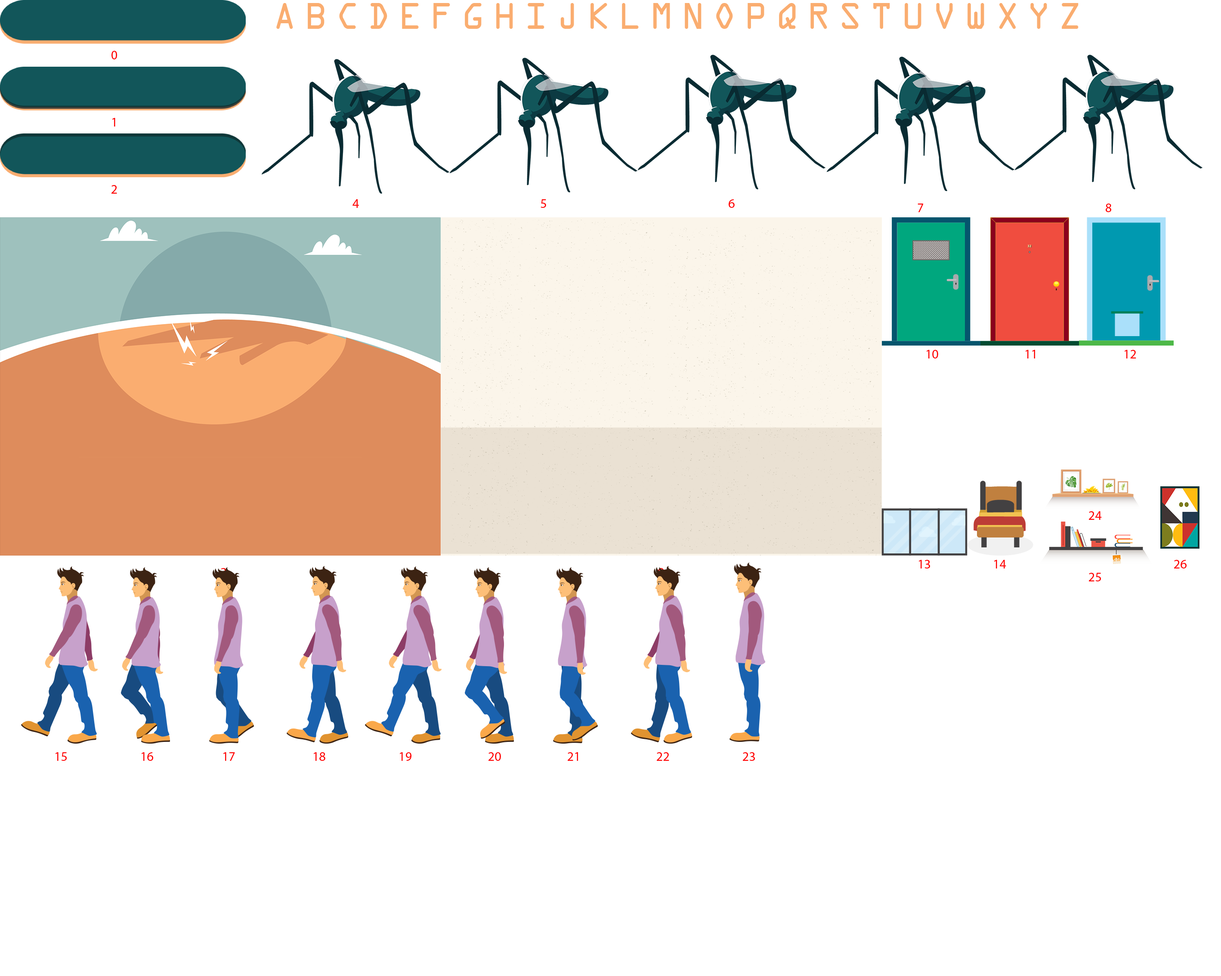
<style>
.page{position:relative;width:1221px;height:976px;background:#ffffff}
.page>*{position:absolute;margin:0}
.t1{font:39.6px "OCRAExtended";color:#faad70}
.t2{font:12.9px "MyriadPro-Regular";color:#ff0000}
.t3{font:12.9px "MyriadPro-Regular"}
</style>
<div class="page">
<p class="t1" style="left:276px;top:3px;width:17px;height:26px">A</p>
<p class="t1" style="left:308px;top:3px;width:17px;height:26px">B</p>
<p class="t1" style="left:339px;top:3px;width:17px;height:26px">C</p>
<p class="t1" style="left:371px;top:3px;width:16px;height:26px">D</p>
<p class="t1" style="left:402px;top:3px;width:17px;height:26px">E</p>
<p class="t1" style="left:434px;top:3px;width:16px;height:26px">F</p>
<p class="t1" style="left:465px;top:3px;width:17px;height:26px">G</p>
<p class="t1" style="left:496px;top:3px;width:17px;height:26px">H</p>
<p class="t1" style="left:528px;top:3px;width:17px;height:26px">I</p>
<p class="t1" style="left:561px;top:3px;width:13px;height:26px">J</p>
<p class="t1" style="left:591px;top:3px;width:16px;height:26px">K</p>
<p class="t1" style="left:622px;top:3px;width:17px;height:26px">L</p>
<p class="t1" style="left:653px;top:3px;width:17px;height:26px">M</p>
<p class="t1" style="left:685px;top:3px;width:17px;height:26px">N</p>
<p class="t1" style="left:716px;top:3px;width:17px;height:26px">O</p>
<p class="t1" style="left:748px;top:3px;width:17px;height:26px">P</p>
<p class="t1" style="left:779px;top:3px;width:17px;height:26px">Q</p>
<p class="t1" style="left:811px;top:3px;width:16px;height:26px">R</p>
<p class="t1" style="left:842px;top:3px;width:17px;height:26px">S</p>
<p class="t1" style="left:873px;top:3px;width:17px;height:26px">T</p>
<p class="t1" style="left:905px;top:3px;width:17px;height:26px">U</p>
<p class="t1" style="left:936px;top:3px;width:17px;height:26px">V</p>
<p class="t1" style="left:968px;top:3px;width:17px;height:26px">W</p>
<p class="t1" style="left:999px;top:3px;width:17px;height:26px">X</p>
<p class="t1" style="left:1031px;top:3px;width:16px;height:26px">Y</p>
<p class="t1" style="left:1062px;top:3px;width:17px;height:26px">Z</p>
<p class="t2" style="left:111px;top:51px;width:6px;height:8px">0</p>
<p class="t2" style="left:112px;top:118px;width:3px;height:9px">1</p>
<p class="t2" style="left:111px;top:185px;width:6px;height:9px">2</p>
<p class="t2" style="left:353px;top:199px;width:6px;height:9px">4</p>
<p class="t2" style="left:541px;top:199px;width:5px;height:9px">5</p>
<p class="t2" style="left:729px;top:199px;width:6px;height:9px">6</p>
<p class="t2" style="left:918px;top:204px;width:5px;height:8px">7</p>
<p class="t2" style="left:1106px;top:204px;width:6px;height:8px">8</p>
<p class="t2" style="left:927px;top:350px;width:11px;height:9px">10</p>
<p class="t2" style="left:1026px;top:350px;width:9px;height:9px">11</p>
<p class="t2" style="left:1125px;top:350px;width:12px;height:9px">12</p>
<p class="t2" style="left:1089px;top:511px;width:13px;height:9px">24</p>
<p class="t3" style="left:221px;top:568px;width:5px;height:9px">3</p>
<p class="t2" style="left:919px;top:560px;width:11px;height:9px">13</p>
<p class="t2" style="left:994px;top:560px;width:12px;height:9px">14</p>
<p class="t2" style="left:1174px;top:560px;width:13px;height:9px">26</p>
<p class="t2" style="left:1089px;top:573px;width:12px;height:9px">25</p>
<p class="t2" style="left:56px;top:753px;width:11px;height:8px">15</p>
<p class="t2" style="left:142px;top:753px;width:11px;height:8px">16</p>
<p class="t2" style="left:223px;top:753px;width:12px;height:8px">17</p>
<p class="t2" style="left:314px;top:753px;width:11px;height:8px">18</p>
<p class="t2" style="left:400px;top:753px;width:12px;height:8px">19</p>
<p class="t2" style="left:489px;top:753px;width:12px;height:8px">20</p>
<p class="t2" style="left:568px;top:753px;width:10px;height:8px">21</p>
<p class="t2" style="left:657px;top:753px;width:12px;height:8px">22</p>
<p class="t2" style="left:743px;top:753px;width:12px;height:8px">23</p>
</div>
